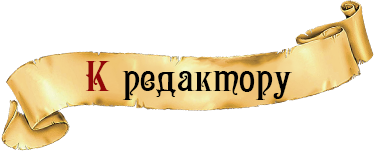
<style>
.page{position:relative;width:376px;height:152px;background:#ffffff}
.page>*{position:absolute;margin:0}
.t1{font:42.3px "Victoriana";color:#000000;scale:1.38 1}
.t2{font:42.3px "Victoriana";color:#920707;scale:1.38 1}
</style>
<div class="page">
<p class="t1" style="left:85px;top:61px;width:207px;height:39px"><span class="t2">К</span> редактору</p>
</div>
